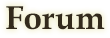
<style>
.page{position:relative;width:110px;height:38px;background:#ffffff}
.page>*{position:absolute;margin:0}
.t1{font:33.3px "BookAntiqua-Bold";color:#332a1c}
</style>
<div class="page">
<p class="t1" style="left:6px;top:6px;width:99px;height:24px">Forum</p>
</div>
